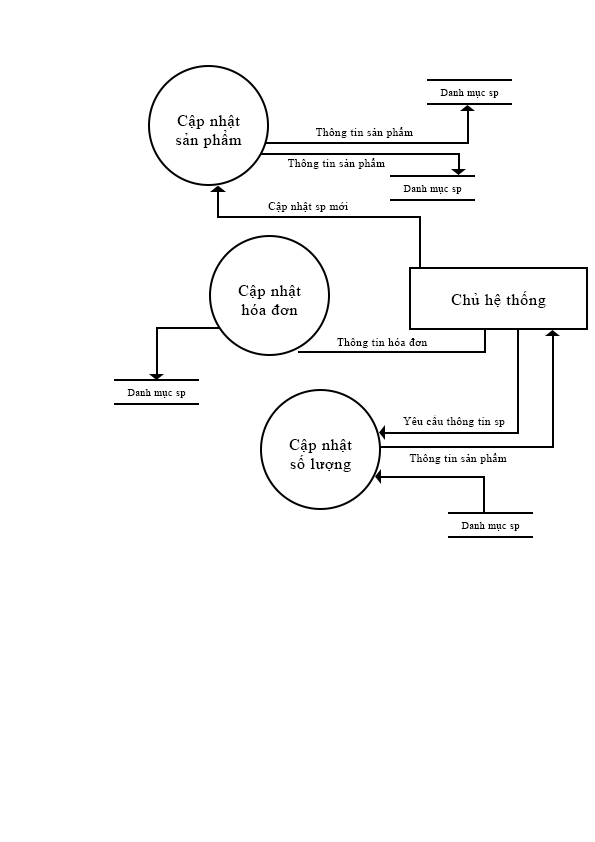
<style>
.page{position:relative;width:595px;height:842px;background:#ffffff}
.page>*{position:absolute;margin:0}
.t1{font:10px "TimesNewRomanPSMT";letter-spacing:0.05em;color:#000000}
.t2{font:15.9px "TimesNewRomanPSMT";letter-spacing:0.05em;color:#000000}
.t3{font:11px "TimesNewRomanPSMT";letter-spacing:0.05em;color:#000000}
</style>
<div class="page">
<p class="t1" style="left:440px;top:89px;width:59px;height:9px">Danh mục sp</p>
<p class="t2" style="left:176px;top:115px;width:66px;height:33px;text-align:center">Cập nhật<br>sản phẩm</p>
<p class="t3" style="left:315px;top:127px;width:98px;height:11px">Thông tin sản phẩm</p>
<p class="t3" style="left:287px;top:158px;width:98px;height:11px">Thông tin sản phẩm</p>
<p class="t1" style="left:403px;top:185px;width:59px;height:9px">Danh mục sp</p>
<p class="t3" style="left:268px;top:202px;width:80px;height:10px">Cập nhật sp mới</p>
<p class="t2" style="left:238px;top:285px;width:63px;height:30px;text-align:center">Cập nhật<br>hóa đơn</p>
<p class="t2" style="left:451px;top:291px;width:95px;height:17px">Chủ hệ thống</p>
<p class="t3" style="left:337px;top:338px;width:91px;height:10px">Thông tin hóa đơn</p>
<p class="t1" style="left:127px;top:389px;width:59px;height:9px">Danh mục sp</p>
<p class="t3" style="left:403px;top:415px;width:102px;height:12px">Yêu cầu thông tin sp</p>
<p class="t2" style="left:289px;top:439px;width:63px;height:33px;text-align:center">Cập nhật<br>số lượng</p>
<p class="t3" style="left:409px;top:453px;width:98px;height:11px">Thông tin sản phẩm</p>
<p class="t1" style="left:461px;top:522px;width:59px;height:9px">Danh mục sp</p>
</div>
